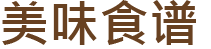
<style>
.page{position:relative;width:211px;height:49px;background:#ffffff}
.page>*{position:absolute;margin:0}
.t1{font:50px "MicrosoftJhengHeiBold";color:#684121}
</style>
<div class="page">
<p class="t1" style="left:2px;top:0px;width:194px;height:45px">美味食谱</p>
</div>
